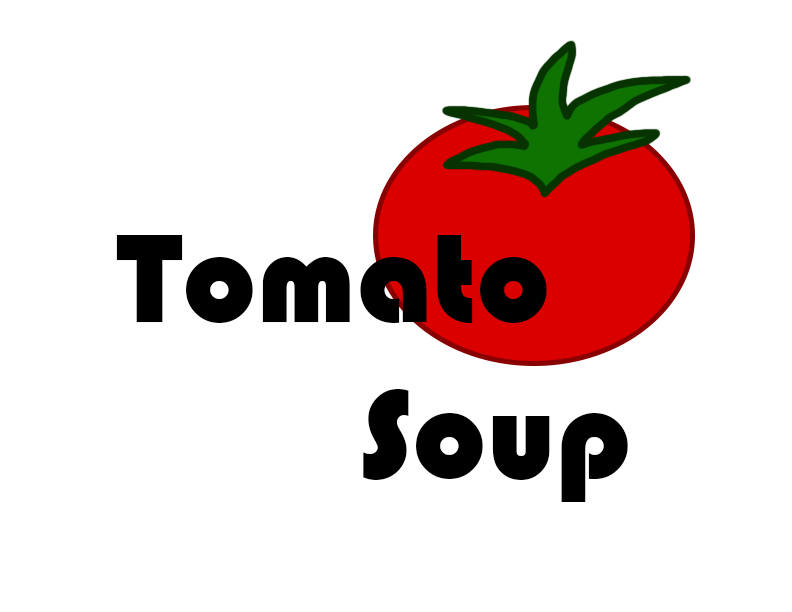
<style>
.page{position:relative;width:792px;height:612px;background:#ffffff}
.page>*{position:absolute;margin:0}
.t1{font:130px "Bauhaus93";color:#000000}
</style>
<div class="page">
<p class="t1" style="left:116px;top:235px;width:512px;height:267px;text-align:center">Tomato <br>         Soup</p>
</div>
